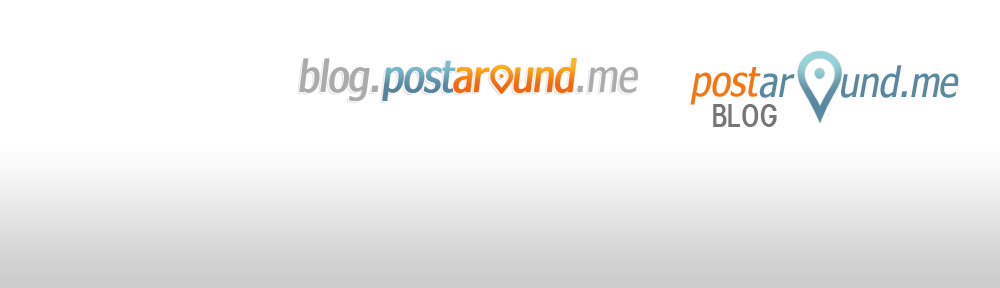
<style>
.page{position:relative;width:1000px;height:288px;background:#ffffff}
.page>*{position:absolute;margin:0}
.t1{font:44.4px "Nina";color:#ababab}
.t2{font:41.7px "Nina";color:#5a88a0;font-style:italic}
.t3{font:41.7px "Nina";color:#f67511;font-style:italic}
.t4{font:33.3px "BlueHighwayDType";color:#767676}
</style>
<div class="page">
<p class="t1" style="left:299px;top:58px;width:79px;height:43px">blog.</p>
<p class="t1" style="left:300px;top:58px;width:79px;height:43px">blog.</p>
<p class="t2" style="left:841px;top:65px;width:118px;height:33px">und.me</p>
<p class="t3" style="left:690px;top:67px;width:71px;height:38px">post</p>
<p class="t2" style="left:759px;top:73px;width:36px;height:25px">ar</p>
<p class="t4" style="left:713px;top:104px;width:64px;height:23px">Blog</p>
</div>
